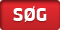
<style>
.page{position:relative;width:60px;height:30px}
.page>*{position:absolute;margin:0}
.t1{font:20px "KlavikaBold-Bold";color:#ffffff}
</style>
<div class="page">
<p class="t1" style="left:13px;top:6px;width:34px;height:16px">SØG</p>
</div>
